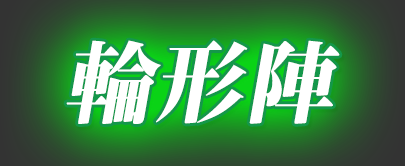
<style>
.page{position:relative;width:405px;height:166px}
.page>*{position:absolute;margin:0}
.t1{font:89px "KochoStd-Heavy";letter-spacing:0.025em;color:#ffffff;font-weight:bold;font-style:italic}
</style>
<div class="page">
<p class="t1" style="left:66px;top:40px;width:274px;height:84px">輪形陣</p>
</div>
